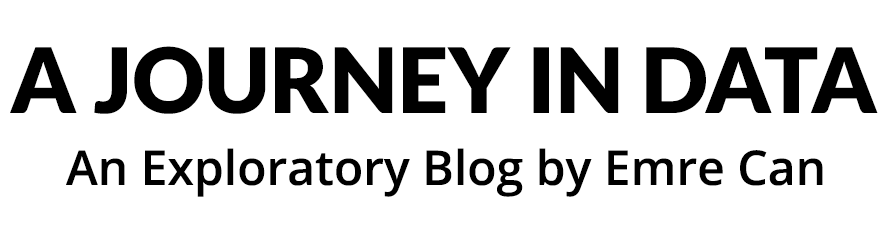
<style>
.page{position:relative;width:886px;height:238px;background:#ffffff}
.page>*{position:absolute;margin:0}
.t1{font:90px "Lato-Black";color:#000000}
.t2{font:48px "OpenSans-Semibold";color:#000000}
</style>
<div class="page">
<p class="t1" style="left:10px;top:46px;width:868px;height:68px">A JOURNEY IN DATA</p>
<p class="t2" style="left:66px;top:148px;width:757px;height:49px">An Exploratory Blog by Emre Can</p>
</div>
